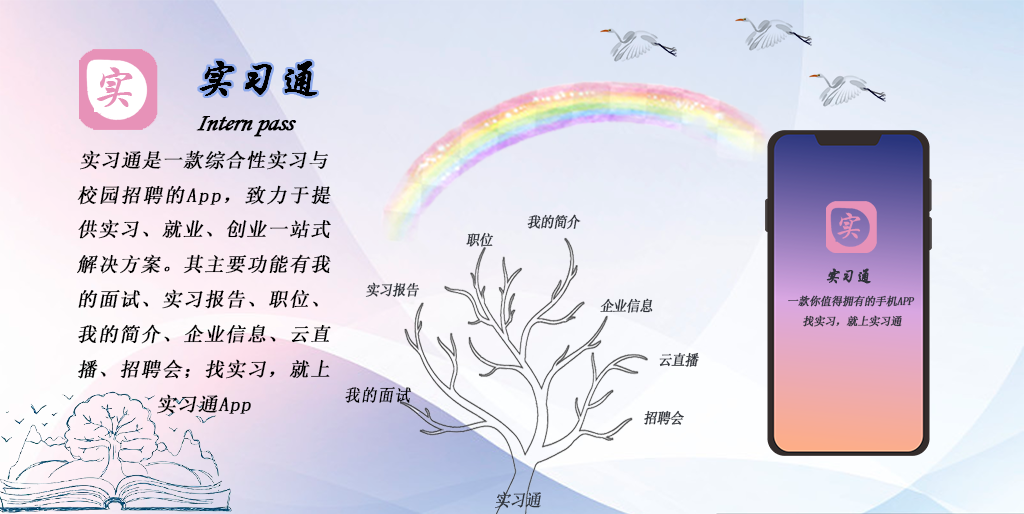
<style>
.page{position:relative;width:1024px;height:514px}
.page>*{position:absolute;margin:0}
.t1{font:25.2px "STLiti";letter-spacing:-0.04em;color:#000000;font-weight:bold;font-style:italic}
.t2{font:19.6px/34.8px "NSimSun";letter-spacing:0.04em;color:#000000;font-weight:bold;font-style:italic}
.t3{font:10.6px "NSimSun";letter-spacing:-0.04em;color:#2e3239;font-weight:bold;font-style:italic;scale:0.91 1}
.t4{font:17.2px "STXingkai";letter-spacing:-0.04em;color:#2e3239;font-weight:bold;font-style:italic;scale:0.91 1}
.t5{font:11.2px "NSimSun";letter-spacing:-0.04em;color:#2e3239;font-weight:bold;font-style:italic}
.t6{font:17.2px "NSimSun";letter-spacing:0.04em;color:#000000;font-weight:bold;font-style:italic;scale:0.91 1}
.t7{font:17.2px "NSimSun";letter-spacing:-0.04em;color:#2e3239;font-weight:bold;font-style:italic;scale:0.91 1}
</style>
<div class="page">
<p class="t1" style="left:196px;top:116px;width:101px;height:21px">Intern pass</p>
<p class="t2" style="left:77px;top:150px;width:254px;height:264px;text-align:justify">实习通是一款综合性实习与<br>校园招聘的App，致力于提供实习、就业、创业一站式解决方案。其主要功能有我的面试、实习报告、职位、我的简介、企业信息、云直播、招聘会；找实习，就上实习通App</p>
<p class="t3" style="left:527px;top:214px;width:54px;height:15px">我的简介</p>
<p class="t3" style="left:466px;top:232px;width:28px;height:15px">职位</p>
<p class="t4" style="left:826px;top:268px;width:45px;height:16px">实习通</p>
<p class="t3" style="left:365px;top:282px;width:55px;height:15px">实习报告</p>
<p class="t3" style="left:600px;top:298px;width:53px;height:15px">企业信息</p>
<p class="t5" style="left:788px;top:295px;width:127px;height:12px">一款你值得拥有的手机APP</p>
<p class="t5" style="left:803px;top:315px;width:99px;height:12px">找实习，就上实习通</p>
<p class="t3" style="left:659px;top:352px;width:40px;height:15px">云直播</p>
<p class="t6" style="left:345px;top:387px;width:66px;height:16px">我的面试</p>
<p class="t3" style="left:644px;top:410px;width:40px;height:15px">招聘会</p>
<p class="t7" style="left:495px;top:491px;width:46px;height:18px">实习通</p>
</div>
